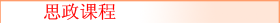
<style>
.page{position:relative;width:280px;height:23px;background:#ffffff}
.page>*{position:absolute;margin:0}
.t1{font:18px "SimSun";color:#ff0000}
</style>
<div class="page">
<p class="t1" style="left:44px;top:3px;width:72px;height:17px">思政课程</p>
</div>
